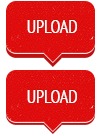
<style>
.page{position:relative;width:100px;height:136px;background:#ffffff}
.page>*{position:absolute;margin:0}
.t1{font:17.8px "PTSans-Narrow";color:#fdfbfa}
</style>
<div class="page">
<p class="t1" style="left:27px;top:20px;width:50px;height:13px">UPLOAD</p>
<p class="t1" style="left:27px;top:90px;width:50px;height:13px">UPLOAD</p>
</div>
